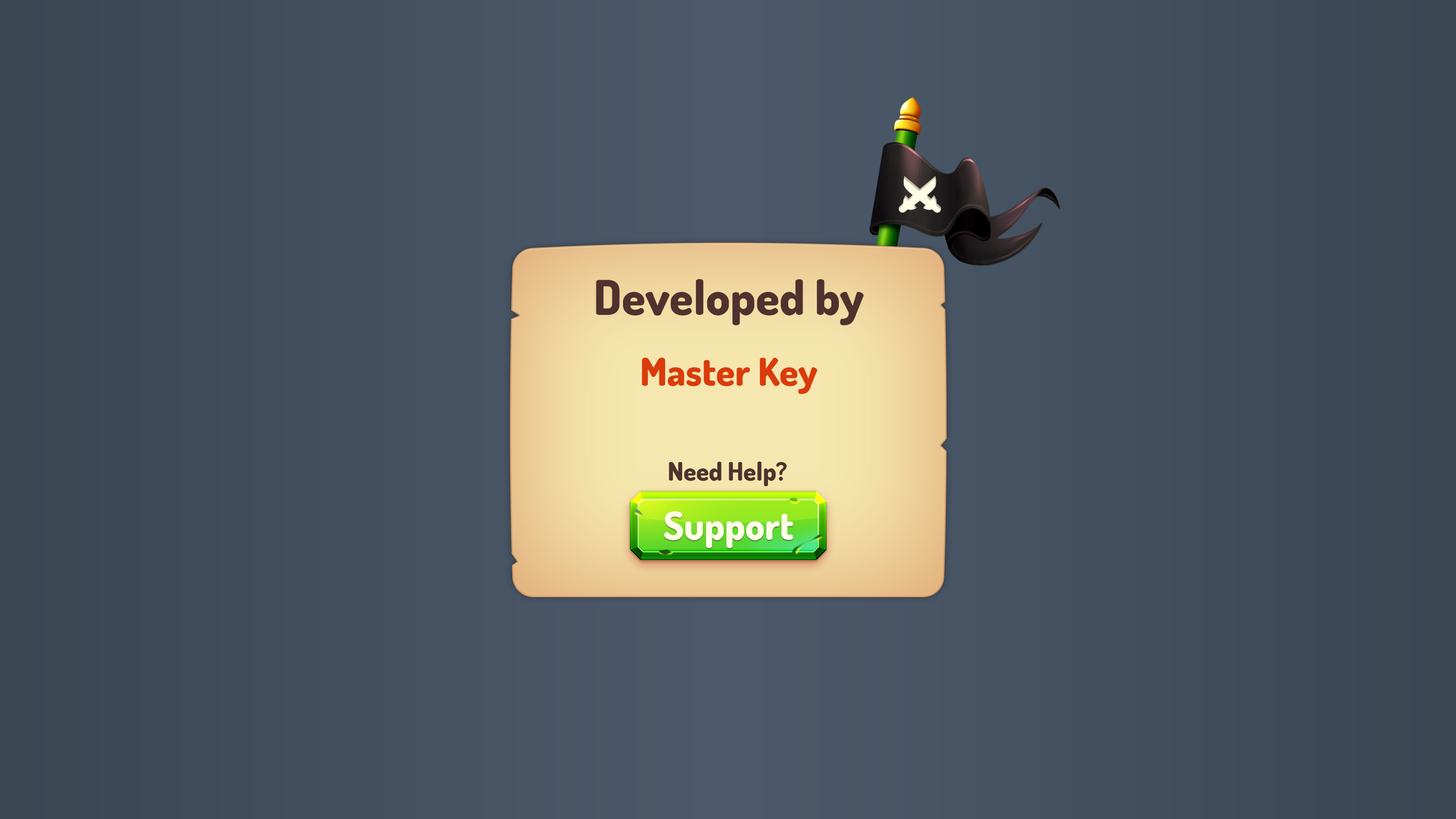
<style>
.page{position:relative;width:1456px;height:819px}
.page>*{position:absolute;margin:0}
.t1{font:48px "Dosis-ExtraBold";color:#4f312d}
.t2{font:38.4px "Dosis-ExtraBold";color:#da3b0b}
.t3{font:25.6px "Dosis-ExtraBold";color:#4f312d}
.t4{font:38.4px "Dosis-ExtraBold";color:#fffde6}
</style>
<div class="page">
<p class="t1" style="left:596px;top:279px;width:268px;height:47px">Developed by</p>
<p class="t2" style="left:642px;top:358px;width:175px;height:36px">Master Key</p>
<p class="t3" style="left:669px;top:461px;width:118px;height:26px">Need Help?</p>
<p class="t4" style="left:664px;top:511px;width:129px;height:37px">Support</p>
</div>
